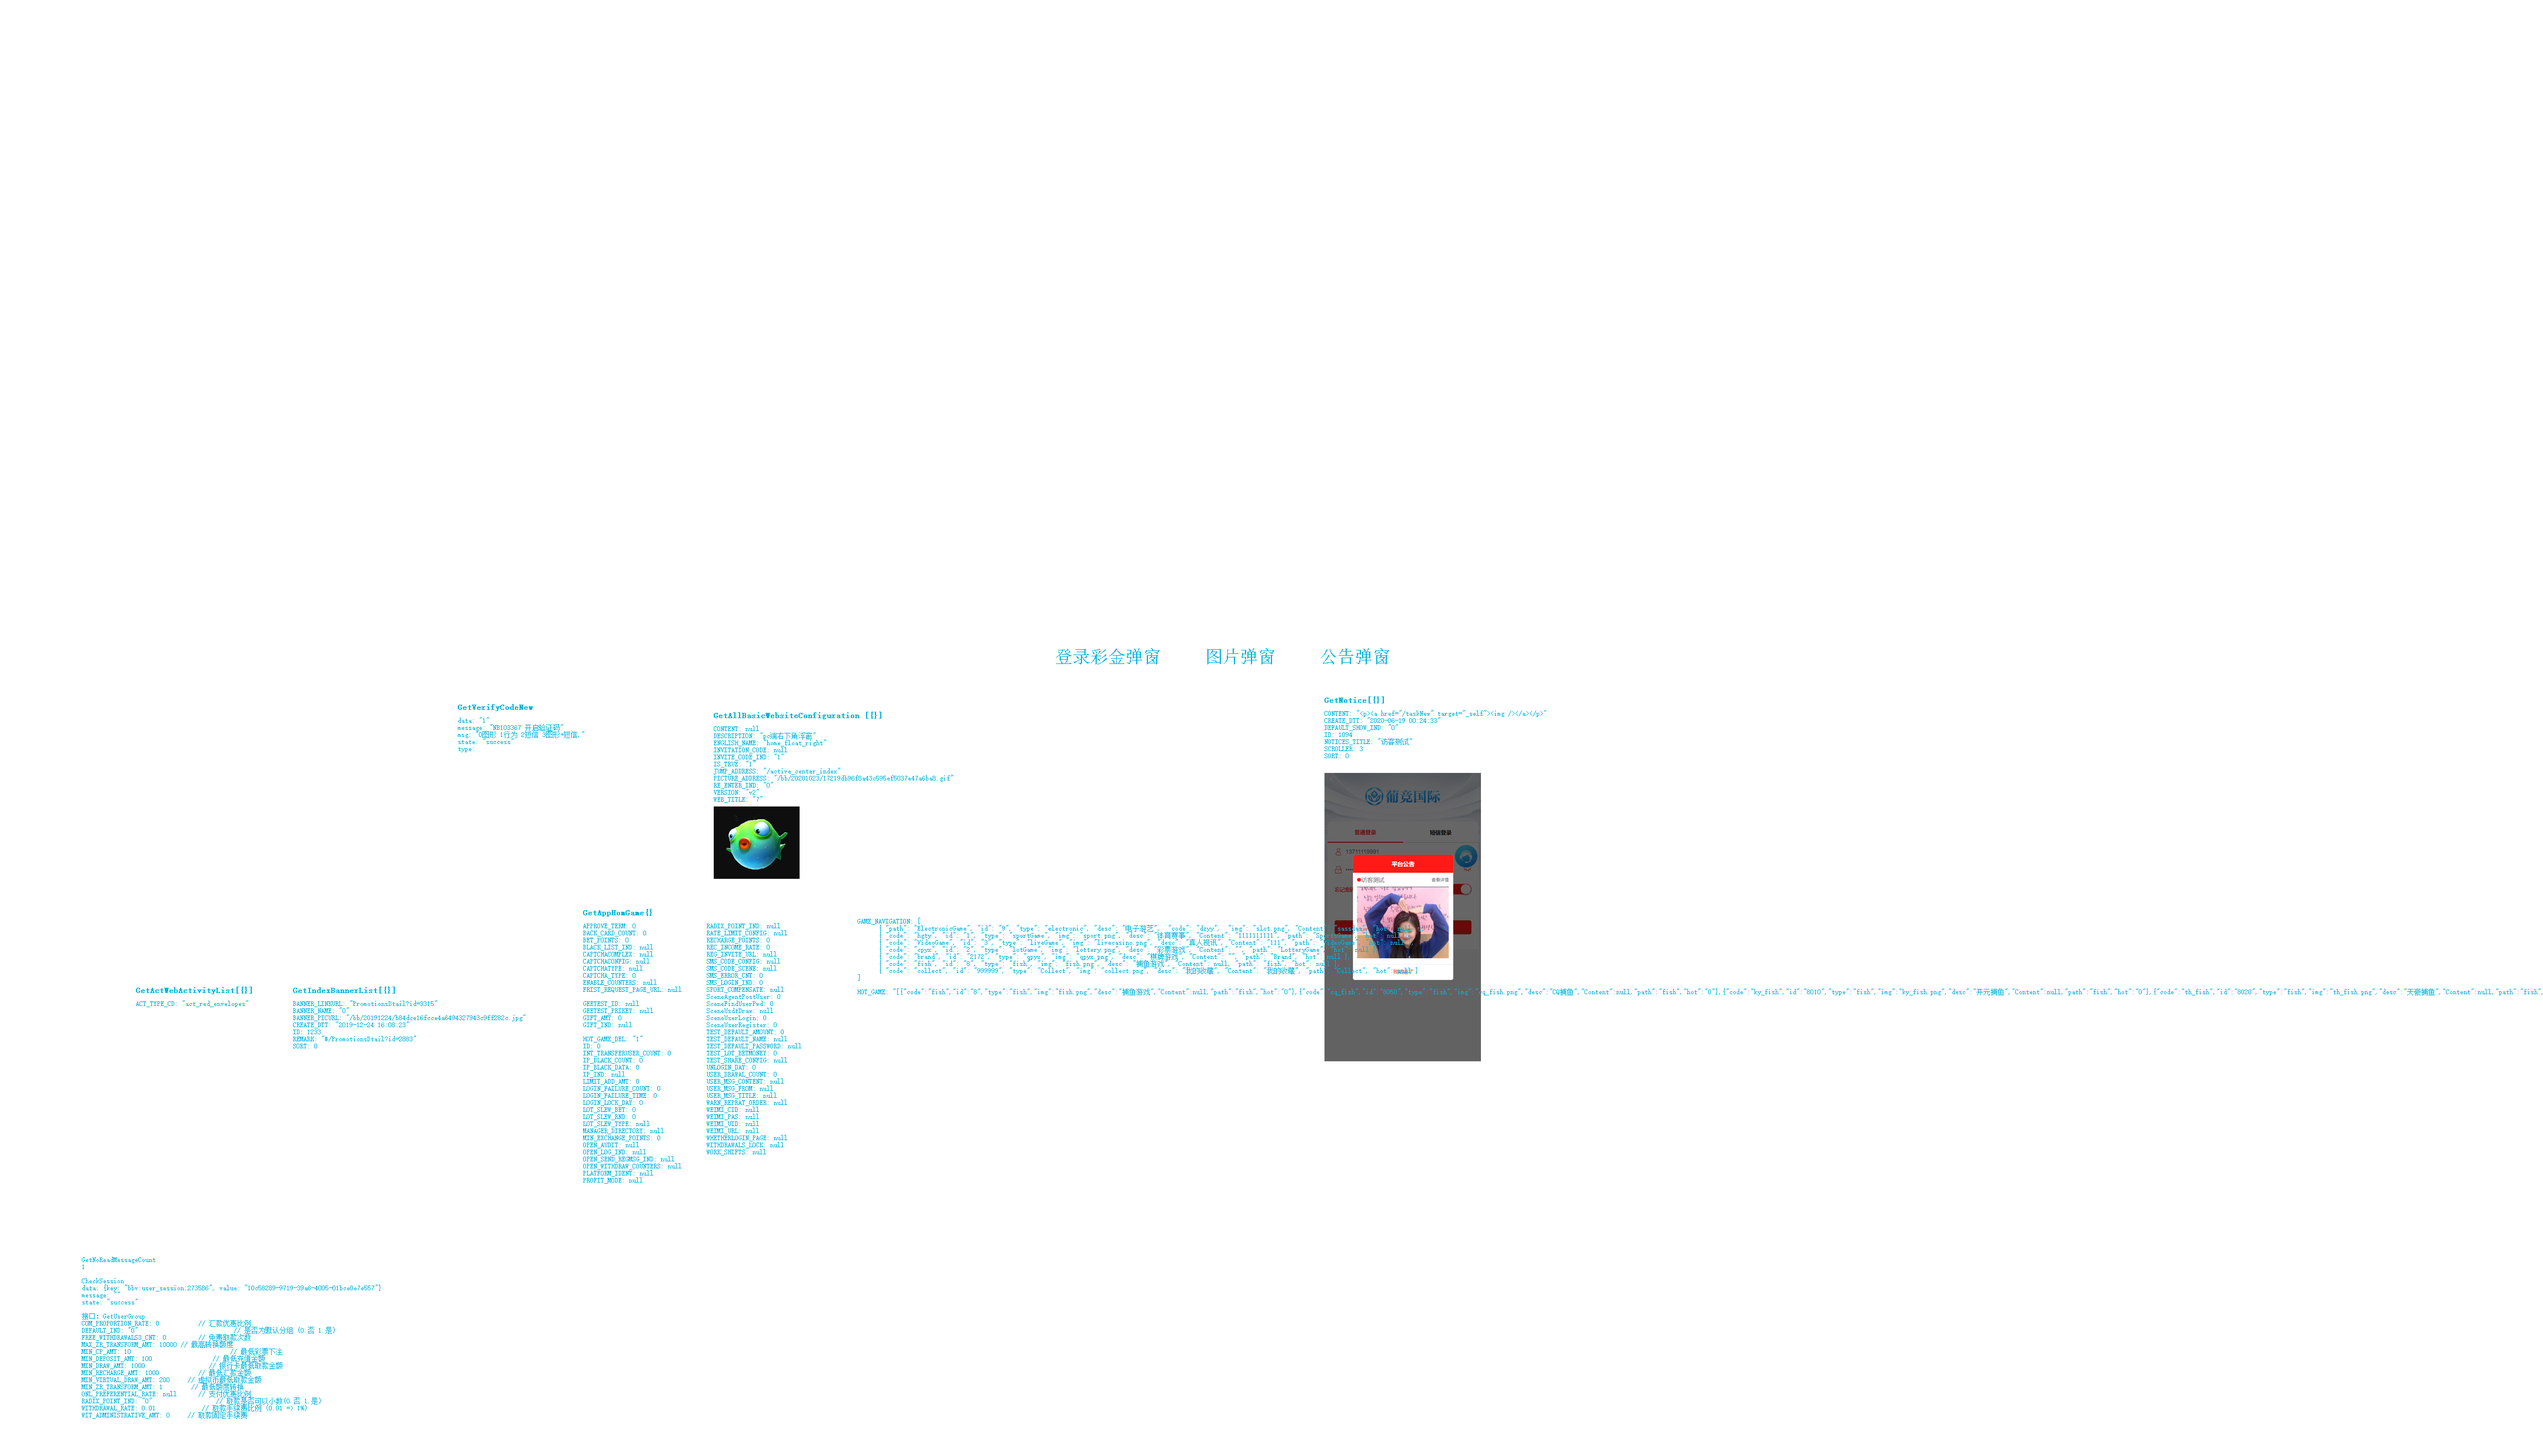
<style>
.page{position:relative;width:2543px;height:1431px;background:#ffffff}
.page>*{position:absolute;margin:0}
.t1{font:17.7px "SimSun";color:#00b4dc}
.t2{font:7.1px/7.1px "SimSun";color:#00b4dc}
.t3{font:8.2px/7.1px "SimSun";color:#00b4dc;font-weight:bold}
</style>
<div class="page">
<p class="t1" style="left:1056px;top:648px;width:333px;height:16px">登录彩金弹窗     图片弹窗     公告弹窗</p>
<p class="t2" style="left:1325px;top:696px;width:221px;height:62px"><span class="t3">GetNotice[{}]<br><br></span>CONTENT: "&lt;p&gt;&lt;a href="/taskNew" target="_self"&gt;&lt;img /&gt;&lt;/a&gt;&lt;/p&gt;"<br>CREATE_DTT: "2020-06-19 00:24:33"<br>DEFAULT_SHOW_IND: "0"<br>ID: 1094<br>NOTICES_TITLE: "访客测试"<br>SCROLLER: 3<br>SORT: 0</p>
<p class="t2" style="left:458px;top:704px;width:126px;height:48px"><span class="t3">GetVerifyCodeNew<br><br></span>data: "1"<br>message: "NB103367 开启验证码"<br>msg: "0图形 1行为 2短信 3图形+短信,"<br>state: "success"<br>type:</p>
<p class="t2" style="left:714px;top:711px;width:239px;height:92px"><span class="t3">GetAllBasicWebsiteConfiguration [{}]<br><br></span>CONTENT: null<br>DESCRIPTION: "pc端右下角浮窗"<br>ENGLISH_NAME: "home_float_right"<br>INVITATION_CODE: null<br>INVITE_CODE_IND: "1"<br>IS_TRUE: "1"<br>JUMP_ADDRESS: "/active_center_index"<br>PICTURE_ADDRESS: "/bb/20201023/17219db96f8a43c595ef5037e47a6ba8.gif"<br>RE_ENTER_IND: "0"<br>VERSION: "v2"<br>WEB_TITLE: "7"</p>
<p class="t2" style="left:583px;top:909px;width:98px;height:274px"><span class="t3">GetAppHomGame{}<br></span><br>APPROVE_TERM: 0<br>BACK_CARD_COUNT: 0<br>BET_POINTS: 0<br>BLACK_LIST_IND: null<br>CAPTCHACOMPLEX: null<br>CAPTCHACONFIG: null<br>CAPTCHATYPE: null<br>CAPTCHA_TYPE: 0<br>ENABLE_COUNTERS: null<br>FRIST_REQUEST_PAGE_URL: null<br><br>GEETEST_ID: null<br>GEETEST_PRIKEY: null<br>GIFT_AMT: 0<br>GIFT_IND: null<br><br>HOT_GAME_DEL: "1"<br>ID: 0<br>INT_TRANSFERUSER_COUNT: 0<br>IP_BLACK_COUNT: 0<br>IP_BLACK_DATA: 0<br>IP_IND: null<br>LIMIT_ADD_AMT: 0<br>LOGIN_FAILURE_COUNT: 0<br>LOGIN_FAILURE_TIME: 0<br>LOGIN_LOCK_DAY: 0<br>LOT_SLEW_BET: 0<br>LOT_SLEW_RND: 0<br>LOT_SLEW_TYPE: null<br>MANAGER_DIRECTORY: null<br>MIN_EXCHANGE_POINTS: 0<br>OPEN_AUDIT: null<br>OPEN_LOG_IND: null<br>OPEN_SEND_REGMSG_IND: null<br>OPEN_WITHDRAW_COUNTERS: null<br>PLATFORM_IDENT: null<br>PROFIT_MODE: null</p>
<p class="t2" style="left:707px;top:923px;width:94px;height:232px">RADIX_POINT_IND: null<br>RATE_LIMIT_CONFIG: null<br>RECHARGE_POINTS: 0<br>REC_INCOME_RATE: 0<br>REG_INVITE_URL: null<br>SMS_CODE_CONFIG: null<br>SMS_CODE_SCENE: null<br>SMS_ERROR_CNT: 0<br>SMS_LOGIN_IND: 0<br>SPORT_COMPENSATE: null<br>SceneAgentPostUser: 0<br>SceneFindUserPwd: 0<br>SceneUsdtDraw: null<br>SceneUserLogin: 0<br>SceneUserRegister: 0<br>TEST_DEFAULT_AMOUNT: 0<br>TEST_DEFAULT_NAME: null<br>TEST_DEFAULT_PASSWORD: null<br>TEST_LOT_BETMONEY: 0<br>TEST_SHARE_CONFIG: null<br>UNLOGIN_DAY: 0<br>USER_DRAWAL_COUNT: 0<br>USER_MSG_CONTENT: null<br>USER_MSG_FROM: null<br>USER_MSG_TITLE: null<br>WARN_REPRAT_ORDER: null<br>WEIMI_CID: null<br>WEIMI_PAS: null<br>WEIMI_UID: null<br>WEIMI_URL: null<br>WHETHERLOGIN_PAGE: null<br>WITHDRAWALS_LOCK: null<br>WORK_SHIFTS: null</p>
<p class="t2" style="left:136px;top:986px;width:116px;height:21px"><span class="t3">GetActWebActivityList[{}]<br><br></span>ACT_TYPE_CD: "act_red_envelopes"</p>
<p class="t2" style="left:293px;top:986px;width:232px;height:62px"><span class="t3">GetIndexBannerList[{}]<br><br></span>BANNER_LINKURL: "PromotionsDtail?id=3315"<br>BANNER_NAME: "0"<br>BANNER_PICURL: "/bb/20191224/b84dce16fcce4a6494327943c9ff282c.jpg"<br>CREATE_DTT: "2019-12-24 16:08:23"<br>ID: 1233<br>REMARK: "#/PromotionsDtail?id=2883"<br>SORT: 0</p>
</div>
